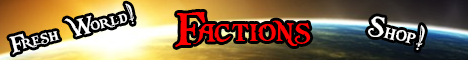
<style>
.page{position:relative;width:468px;height:60px}
.page>*{position:absolute;margin:0}
.t1{font:25px "PiecesofEight";color:#ffffff}
.t2{font:49px "PiecesofEight";color:#ff0000}
.t3{font:30px "PiecesofEight";color:#ffffff}
</style>
<div class="page">
<p class="t1" style="left:9px;top:3px;width:125px;height:52px;rotate:-15deg">Fresh World!</p>
<p class="t2" style="left:175px;top:12px;width:136px;height:35px">Factions</p>
<p class="t3" style="left:368px;top:16px;width:57px;height:34px;rotate:15deg">Shop!</p>
</div>
